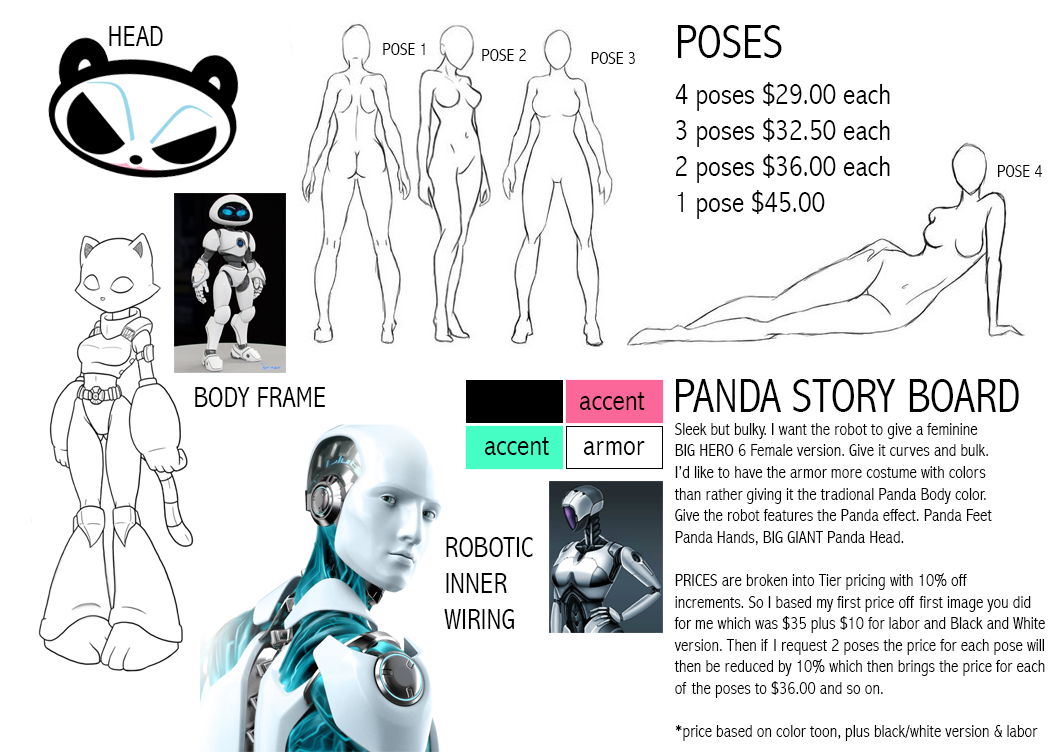
<style>
.page{position:relative;width:1063px;height:752px;background:#ffffff}
.page>*{position:absolute;margin:0}
.t1{font:30px "AbadiMT-CondensedLight";color:#000000}
.t2{font:48px "AbadiMT-CondensedLight";color:#000000}
.t3{font:18px "AbadiMT-CondensedLight";color:#000000}
</style>
<div class="page">
<p class="t1" style="left:109px;top:26px;width:54px;height:20px">HEAD</p>
<p class="t2" style="left:678px;top:25px;width:104px;height:33px">POSES</p>
<p class="t3" style="left:383px;top:43px;width:42px;height:12px">POSE 1</p>
<p class="t3" style="left:482px;top:49px;width:44px;height:12px">POSE 2</p>
<p class="t3" style="left:591px;top:52px;width:44px;height:12px">POSE 3</p>
<p class="t1" style="left:675px;top:82px;width:215px;height:137px">4 poses $29.00 each<br>3 poses $32.50 each<br>2 poses $36.00 each<br>1 pose $45.00</p>
<p class="t3" style="left:998px;top:165px;width:45px;height:12px">POSE 4</p>
<p class="t1" style="left:195px;top:387px;width:130px;height:20px">BODY FRAME</p>
<p class="t2" style="left:676px;top:379px;width:343px;height:33px">PANDA STORY BOARD</p>
<p class="t1" style="left:579px;top:392px;width:66px;height:18px">accent</p>
<p class="t3" style="left:674px;top:423px;width:371px;height:318px">Sleek but bulky. I want the robot to give a feminine<br>BIG HERO 6 Female version. Give it curves and bulk.<br>I’d like to have the armor more costume with colors<br>than rather giving it the tradional Panda Body color.<br>Give the robot features the Panda effect. Panda Feet<br>Panda Hands, BIG GIANT Panda Head.<br><br>PRICES are broken into Tier pricing with 10% off <br>increments. So I based my first price off first image you did <br>for me which was $35 plus $10 for labor and Black and White <br>version. Then if I request 2 poses the price for each pose will <br>then be reduced by 10% which then brings the price for each <br>of the poses to $36.00 and so on.<br><br>*price based on color toon, plus black/white version &amp; labor</p>
<p class="t1" style="left:484px;top:437px;width:65px;height:18px">accent</p>
<p class="t1" style="left:583px;top:441px;width:62px;height:14px">armor</p>
<p class="t1" style="left:444px;top:537px;width:89px;height:92px">ROBOTIC<br>INNER<br>WIRING</p>
</div>
